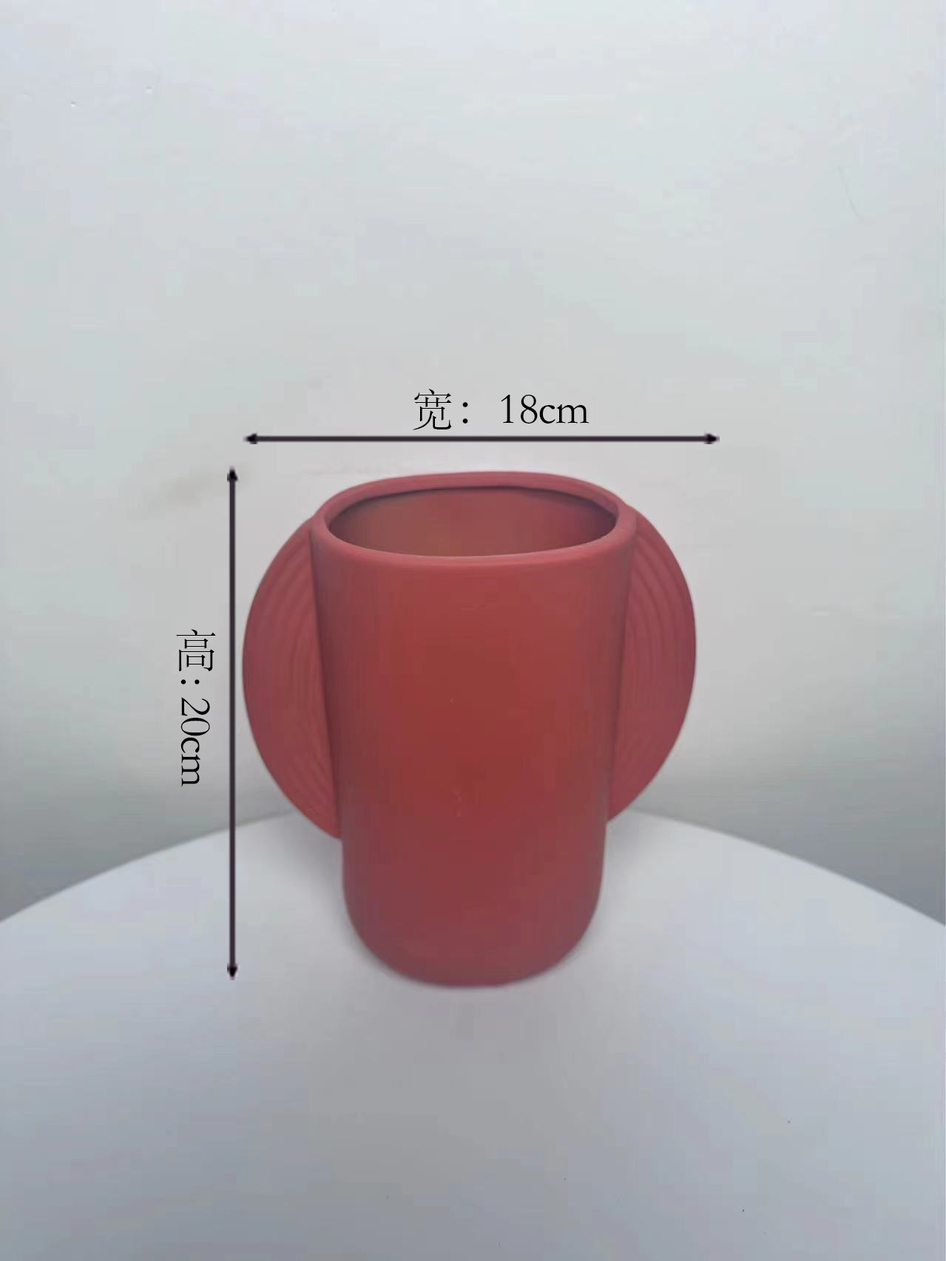
<style>
.page{position:relative;width:946px;height:1261px}
.page>*{position:absolute;margin:0}
.t1{font:44.4px "STSong";letter-spacing:-0.02em;color:#000000}
</style>
<div class="page">
<p class="t1" style="left:413px;top:389px;width:176px;height:41px">宽：18cm</p>
<p class="t1" style="left:176px;top:629px;width:40px;height:158px">高: 20cm</p>
</div>
